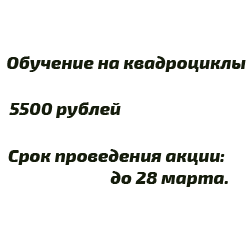
<style>
.page{position:relative;width:250px;height:250px;background:#ffffff}
.page>*{position:absolute;margin:0}
.t1{font:18px "Exo2-ExtraBoldItalic";color:#151c0c}
</style>
<div class="page">
<p class="t1" style="left:7px;top:56px;width:239px;height:16px">Обучение на квадроциклы</p>
<p class="t1" style="left:9px;top:102px;width:112px;height:16px">5500 рублей</p>
<p class="t1" style="left:8px;top:149px;width:220px;height:38px;text-align:right">Срок проведения акции: <br>до 28 марта.</p>
</div>
